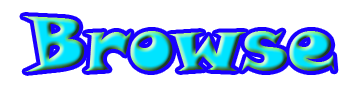
<style>
.page{position:relative;width:360px;height:90px;background:#ffffff}
.page>*{position:absolute;margin:0}
.t1{font:74.3px "SnapITC-Regular"}
</style>
<div class="page">
<p class="t1" style="left:23px;top:16px;width:312px;height:56px">Browse</p>
</div>
